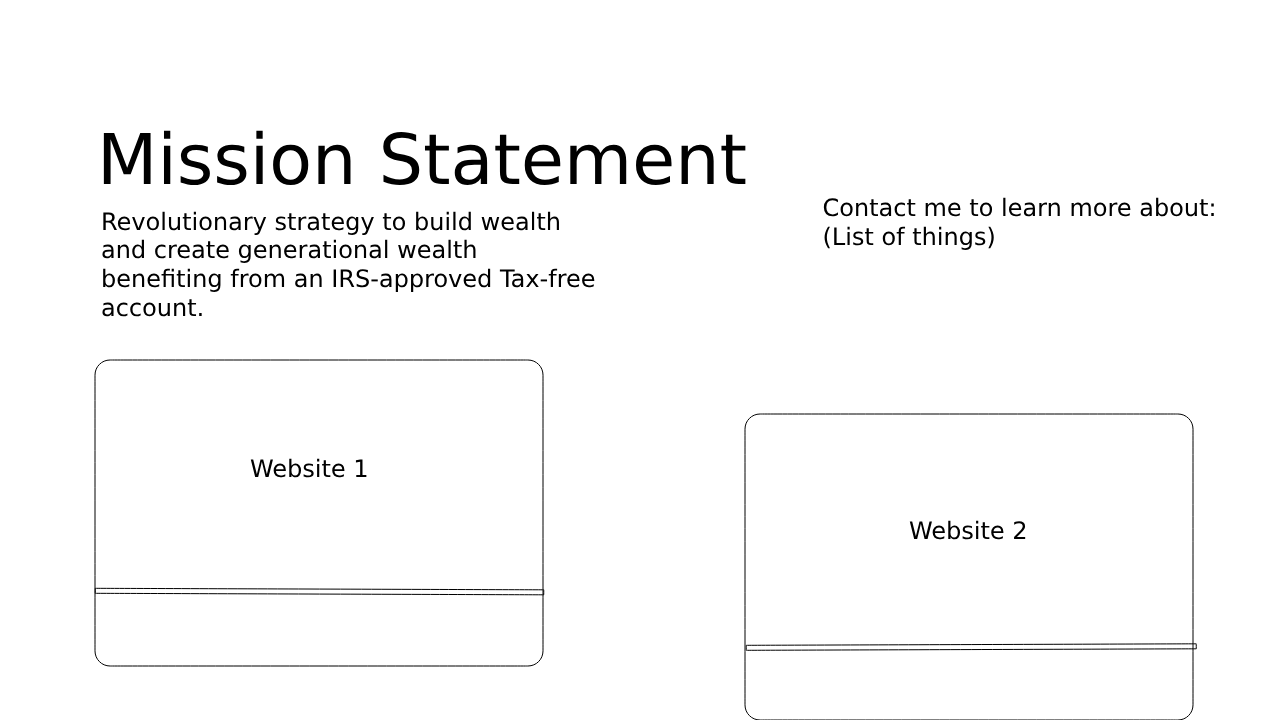
<style>
.page{position:relative;width:1280px;height:720px;background:#ffffff}
.page>*{position:absolute;margin:0}
.t1{font:70px "DejaVuSans";color:#000000}
.t2{font:24px "DejaVuSans";color:#000000}
</style>
<div class="page">
<p class="t1" style="left:103px;top:130px;width:643px;height:55px">Mission Statement</p>
<p class="t2" style="left:823px;top:197px;width:391px;height:53px">Contact me to learn more about:<br>(List of things)</p>
<p class="t2" style="left:102px;top:211px;width:493px;height:106px">Revolutionary strategy to build wealth<br>and create generational wealth<br>benefiting from an IRS-approved Tax-free<br>account.</p>
<p class="t2" style="left:250px;top:458px;width:117px;height:20px">Website 1</p>
<p class="t2" style="left:909px;top:520px;width:117px;height:20px">Website 2</p>
</div>
